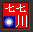
<style>
.page{position:relative;width:33px;height:32px;background:#f20000}
.page>*{position:absolute;margin:0}
.t1{font:10.4px "SimSun";color:#ffffff}
.t2{font:11.7px "SimSun";color:#ffffff}
</style>
<div class="page">
<p class="t1" style="left:5px;top:4px;width:21px;height:8px">七七</p>
<p class="t2" style="left:16px;top:15px;width:11px;height:12px">川</p>
</div>
